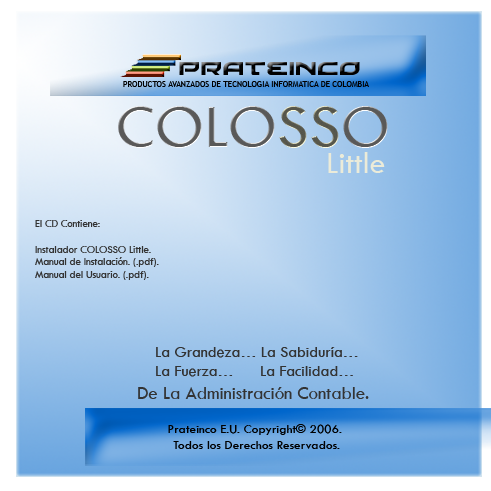
<style>
.page{position:relative;width:491px;height:491px}
.page>*{position:absolute;margin:0}
.t1{font:64px "TwCenMT-Regular";color:#ffffff}
.t2{font:64px "TwCenMT-Regular";color:#ececd9}
.t3{font:32px "TwCenMT-Regular";color:#ececd9}
.t4{font:10.7px "TwCenMT-Regular";color:#333333}
.t5{font:16px "TwCenMT-Regular";color:#333333}
.t6{font:18.7px "TwCenMT-Regular";color:#333333}
.t7{font:13.3px "TwCenMT-Regular";color:#000000}
</style>
<div class="page">
<p class="t1" style="left:118px;top:106px;width:270px;height:42px">COLO<span class="t2">SS</span>O</p>
<p class="t3" style="left:328px;top:152px;width:57px;height:21px">Little</p>
<p class="t4" style="left:35px;top:220px;width:124px;height:60px">El CD Contiene:<br><br>Instalador COLOSSO Little.<br>Manual de Instalación. (.pdf).<br>Manual del Usuario. (.pdf).</p>
<p class="t5" style="left:156px;top:347px;width:202px;height:30px">La Grandeza… La Sabiduría… <br>La Fuerza…      La Facilidad…</p>
<p class="t6" style="left:138px;top:387px;width:231px;height:12px">De La Administración Contable.</p>
<p class="t7" style="left:168px;top:424px;width:174px;height:25px;text-align:center">Prateinco E.U. Copyright© 2006. <br>Todos los Derechos Reservados.</p>
</div>
